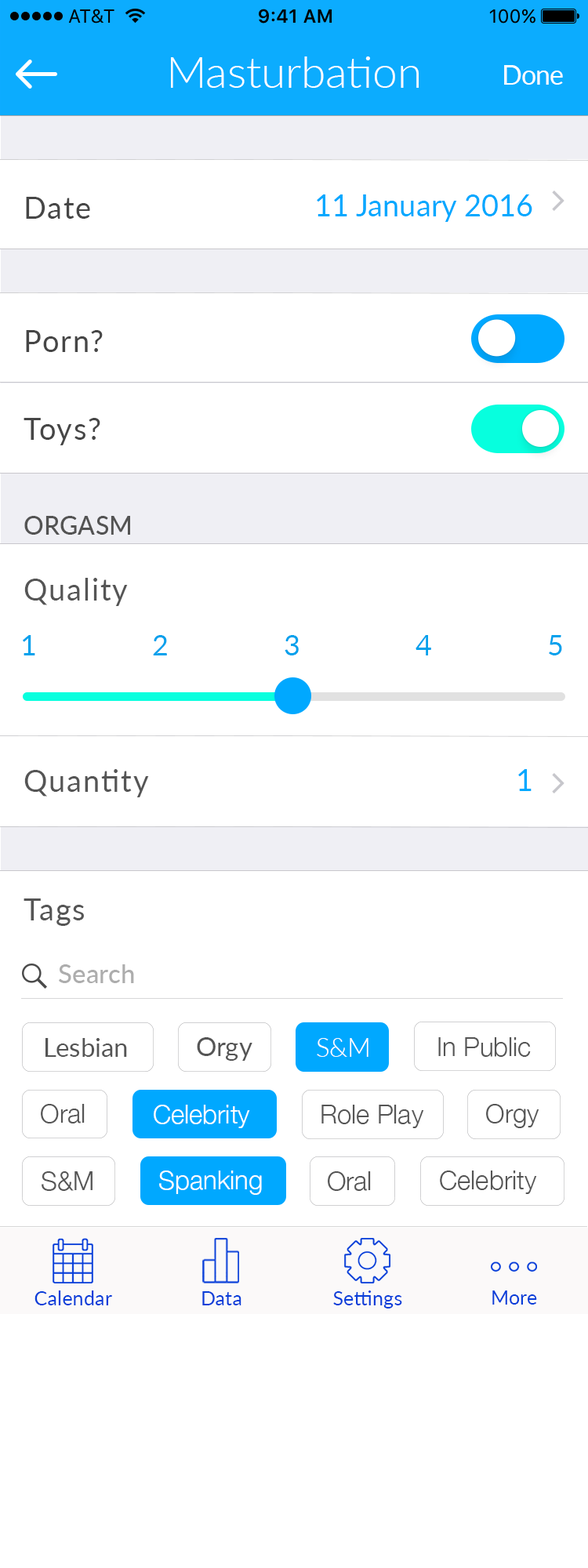
<style>
.page{position:relative;width:588px;height:1568px;background:#ffffff}
.page>*{position:absolute;margin:0}
.t1{font:44.2px "Lato-Light";color:#ffffff}
.t2{font:26.7px "Lato-Regular";letter-spacing:-0.025em;color:#ffffff}
.t3{font:29.8px "Lato-Regular";letter-spacing:0.05em;color:#464646}
.t4{font:29.8px "Lato-Regular";color:#00a8ff}
.t5{font:25.1px "Lato-Medium";letter-spacing:0.01em;color:#464646;text-transform:uppercase}
.t6{font:29.8px "Lato-Regular";letter-spacing:0.05em;color:#555555}
.t7{font:29.2px "Lato-Regular";letter-spacing:0.05em;color:#00a1ec;text-transform:uppercase}
.t8{font:25.9px "Lato-Medium";color:#adadad}
.t9{font:25.9px "Lato-Regular";color:#555555}
.t10{font:25.9px "HelveticaNeue-Light";color:#555555}
.t11{font:25.9px "Lato-Light";color:#ffffff}
.t12{font:25.9px "HelveticaNeue-Light";color:#ffffff}
.t13{font:19.6px "Lato-Regular";letter-spacing:0.01em;color:#083ed9}
</style>
<div class="page">
<p class="t1" style="left:171px;top:56px;width:248px;height:32px">Masturbation</p>
<p class="t2" style="left:504px;top:65px;width:59px;height:20px">Done</p>
<p class="t3" style="left:26px;top:197px;width:64px;height:22px">Date</p>
<p class="t4" style="left:317px;top:194px;width:215px;height:28px">11 January 2016</p>
<p class="t3" style="left:26px;top:330px;width:77px;height:22px">Porn?</p>
<p class="t3" style="left:24px;top:418px;width:76px;height:27px">Toys?</p>
<p class="t5" style="left:24px;top:516px;width:106px;height:19px">orgasm</p>
<p class="t6" style="left:24px;top:578px;width:104px;height:28px">Quality</p>
<p class="t7" style="left:23px;top:635px;width:539px;height:20px">1             2             3             4             5</p>
<p class="t6" style="left:24px;top:769px;width:125px;height:28px">Quantity</p>
<p class="t4" style="left:518px;top:769px;width:14px;height:22px">1</p>
<p class="t6" style="left:24px;top:898px;width:60px;height:28px">Tags</p>
<p class="t8" style="left:59px;top:964px;width:75px;height:19px">Search</p>
<p class="t9" style="left:197px;top:1037px;width:55px;height:24px">Orgy</p>
<p class="t10" style="left:438px;top:1037px;width:93px;height:20px">In Public</p>
<p class="t9" style="left:45px;top:1038px;width:82px;height:19px">Lesbian</p>
<p class="t11" style="left:317px;top:1038px;width:51px;height:19px">S&amp;M</p>
<p class="t10" style="left:41px;top:1104px;width:44px;height:19px">Oral</p>
<p class="t12" style="left:154px;top:1105px;width:96px;height:23px">Celebrity</p>
<p class="t10" style="left:321px;top:1105px;width:103px;height:23px">Role Play</p>
<p class="t10" style="left:486px;top:1104px;width:53px;height:24px">Orgy</p>
<p class="t10" style="left:42px;top:1171px;width:51px;height:20px">S&amp;M</p>
<p class="t12" style="left:159px;top:1171px;width:103px;height:24px">Spanking</p>
<p class="t10" style="left:328px;top:1171px;width:43px;height:20px">Oral</p>
<p class="t10" style="left:440px;top:1171px;width:97px;height:23px">Celebrity</p>
<p class="t13" style="left:34px;top:1290px;width:78px;height:15px">Calendar</p>
<p class="t13" style="left:202px;top:1291px;width:39px;height:14px">Data</p>
<p class="t13" style="left:333px;top:1290px;width:69px;height:18px">Settings</p>
<p class="t13" style="left:492px;top:1290px;width:45px;height:15px">More</p>
</div>
